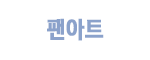
<style>
.page{position:relative;width:150px;height:60px;background:#ffffff}
.page>*{position:absolute;margin:0}
.t1{font:24px "KoreanGD17-R";letter-spacing:-0.025em;color:#8ba2cb;font-weight:bold;scale:0.9 1}
</style>
<div class="page">
<p class="t1" style="left:47px;top:18px;width:57px;height:23px">팬아트</p>
</div>
